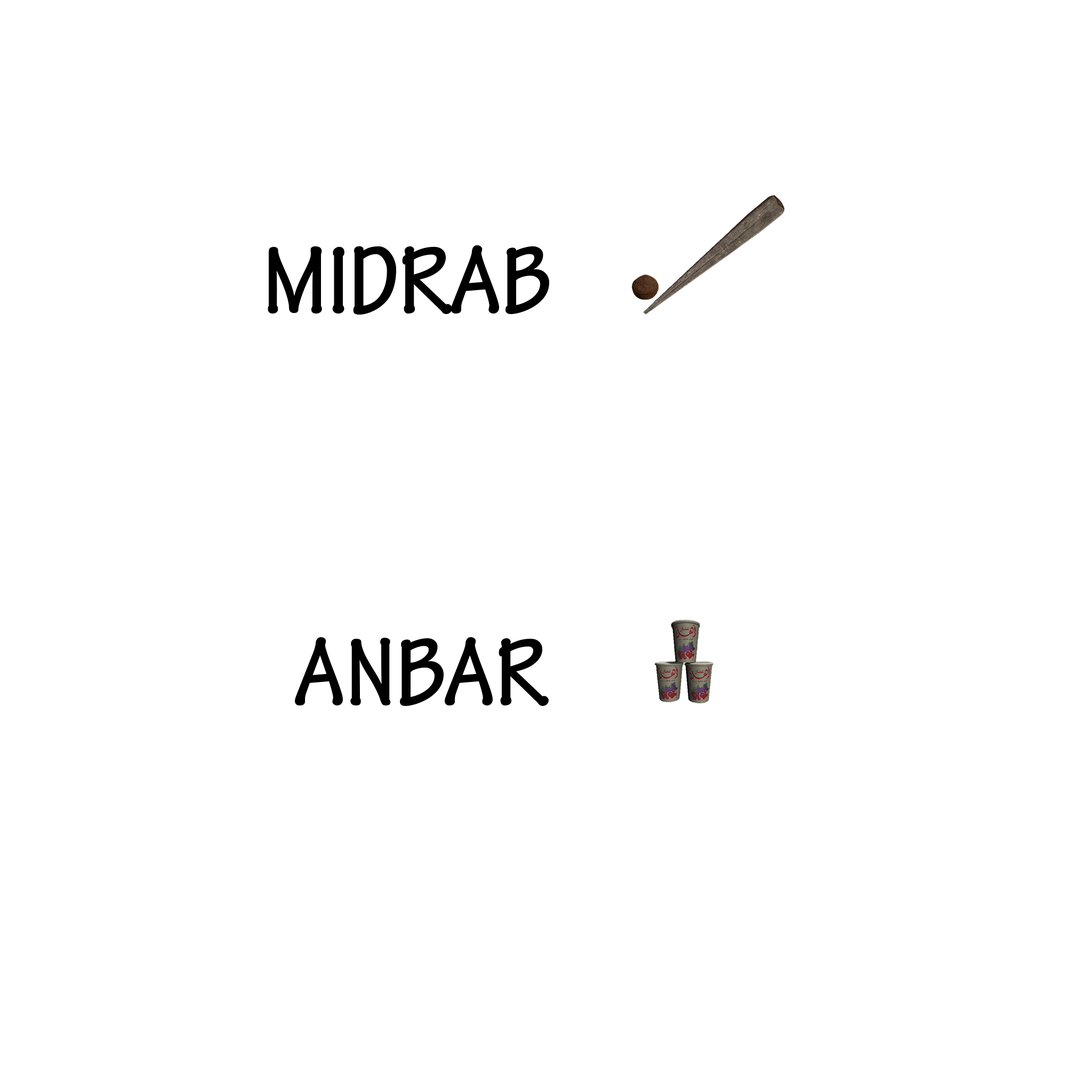
<style>
.page{position:relative;width:1092px;height:1092px;background:#ffffff}
.page>*{position:absolute;margin:0}
.t1{font:102.4px "TektonPro-BoldCond";color:#000000}
</style>
<div class="page">
<p class="t1" style="left:268px;top:245px;width:281px;height:70px">MIDRAB</p>
<p class="t1" style="left:295px;top:637px;width:254px;height:69px">ANBAR</p>
</div>
